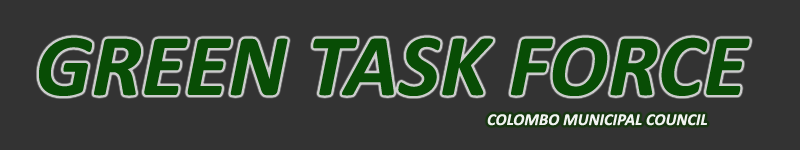
<style>
.page{position:relative;width:800px;height:150px;background:#333333}
.page>*{position:absolute;margin:0}
.t1{font:88.9px "Calibri-BoldItalic";color:#084d05}
.t2{font:16.7px "Calibri-BoldItalic";color:#f1f3f1}
</style>
<div class="page">
<p class="t1" style="left:39px;top:37px;width:711px;height:59px">GREEN TASK FORCE</p>
<p class="t2" style="left:487px;top:114px;width:220px;height:12px">COLOMBO MUNICIPAL COUNCIL</p>
</div>
